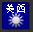
<style>
.page{position:relative;width:33px;height:32px;background:#000090}
.page>*{position:absolute;margin:0}
.t1{font:10.4px "SimSun";color:#ffffff}
</style>
<div class="page">
<p class="t1" style="left:6px;top:4px;width:19px;height:9px">美西</p>
</div>
